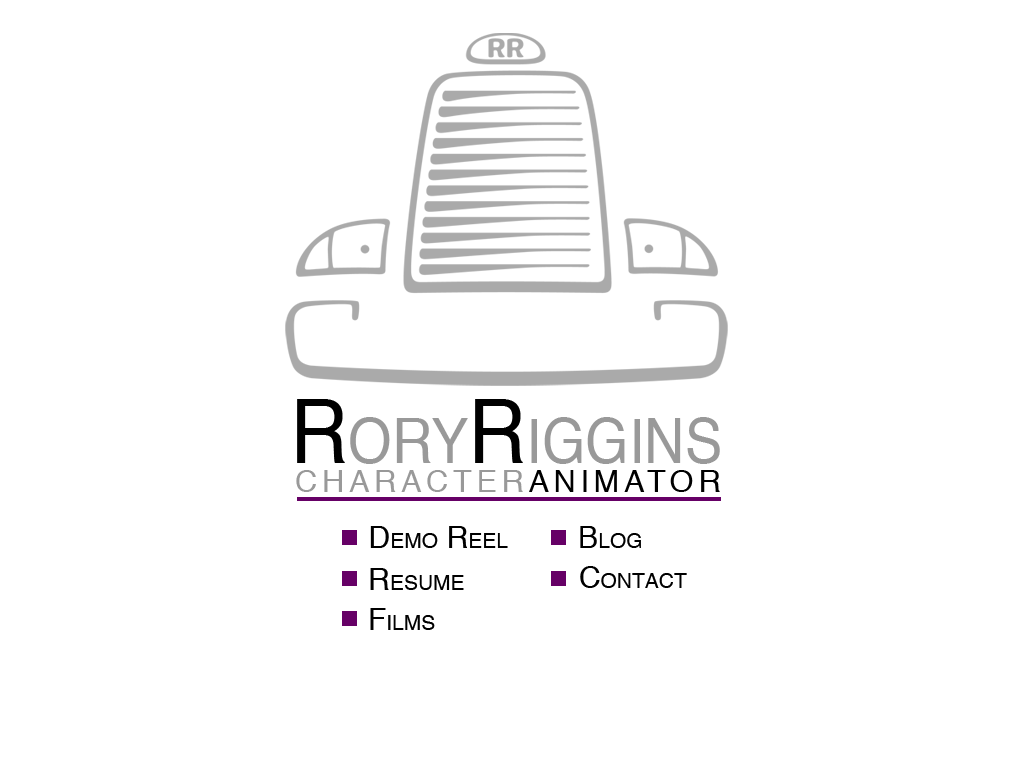
<style>
.page{position:relative;width:1024px;height:768px;background:#ffffff}
.page>*{position:absolute;margin:0}
.t1{font:88px "Helvetica";color:#999999;font-variant:small-caps;scale:0.91 1}
.t2{font:88px "Helvetica";color:#000000;font-variant:small-caps;scale:0.91 1}
.t3{font:44px "Helvetica";letter-spacing:0.15em;color:#999999;font-variant:small-caps}
.t4{font:44px "Helvetica";letter-spacing:0.15em;color:#000000;font-variant:small-caps}
.t5{font:30px "Helvetica";color:#000000;font-variant:small-caps}
</style>
<div class="page">
<p class="t1" style="left:297px;top:399px;width:423px;height:65px"><span class="t2">R</span>ory<span class="t2">R</span>iggins</p>
<p class="t3" style="left:296px;top:470px;width:424px;height:22px">character<span class="t4">animator</span></p>
<p class="t5" style="left:370px;top:526px;width:138px;height:22px">Demo Reel</p>
<p class="t5" style="left:580px;top:526px;width:61px;height:22px">Blog</p>
<p class="t5" style="left:370px;top:568px;width:94px;height:22px">Resume</p>
<p class="t5" style="left:580px;top:566px;width:107px;height:22px">Contact</p>
<p class="t5" style="left:370px;top:608px;width:65px;height:22px">Films</p>
</div>
